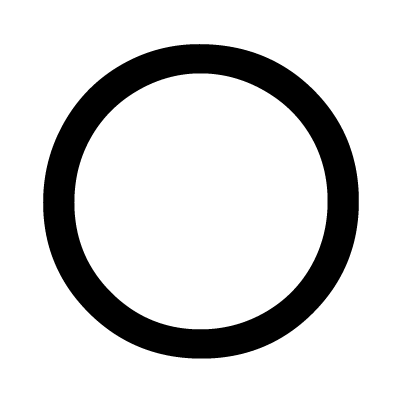
<style>
.page{position:relative;width:400px;height:400px;background:#ffffff}
.page>*{position:absolute;margin:0}
.t1{font:416.7px "CenturyGothic";color:#000000}
</style>
<div class="page">
<p class="t1" style="left:43px;top:44px;width:316px;height:315px">O</p>
</div>
